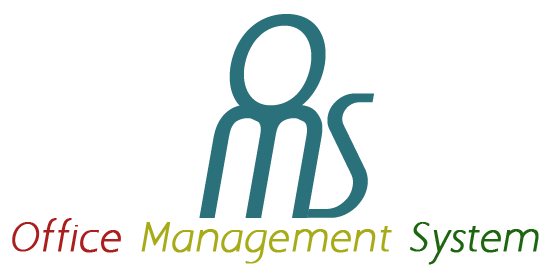
<style>
.page{position:relative;width:551px;height:276px;background:#ffffff}
.page>*{position:absolute;margin:0}
.t1{font:141.6px "ABeeZee-Regular";color:#2b717b;font-style:italic}
.t2{font:141.6px "Andes-Bold";color:#2b717b;font-style:italic}
.t3{font:141.6px "Acropolis";color:#2b717b;font-style:italic}
.t4{font:36.3px "AaarghNormal";color:#a6ab17;font-weight:bold;font-style:italic}
.t5{font:36.3px "AaarghNormal";color:#ab1e1e;font-weight:bold;font-style:italic}
.t6{font:36.3px "AaarghNormal";color:#1b660f;font-weight:bold;font-style:italic}
</style>
<div class="page">
<p class="t1" style="left:229px;top:14px;width:97px;height:103px">O</p>
<p class="t2" style="left:307px;top:93px;width:67px;height:125px">S</p>
<p class="t3" style="left:199px;top:105px;width:124px;height:113px">M</p>
<p class="t4" style="left:12px;top:218px;width:527px;height:47px"><span class="t5">Office </span>Management <span class="t6">System</span></p>
</div>
